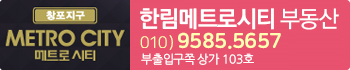
<style>
.page{position:relative;width:350px;height:70px}
.page>*{position:absolute;margin:0}
.t1{font:23px "KoPubDotumPB";letter-spacing:-0.025em;color:#ffffff}
.t2{font:23px "KoPubDotumPM";letter-spacing:-0.025em;color:#ffffff}
.t3{font:21px "NanumSquareRoundOTFEB";letter-spacing:-0.025em;color:#feffb3}
.t4{font:16px "NanumSquareRoundOTFL";letter-spacing:-0.025em;color:#feffb3}
.t5{font:12px "NanumGothicOTF";letter-spacing:-0.05em;color:#ffffff}
.t6{font:12px "NanumGothicOTF";color:#ffffff}
</style>
<div class="page">
<p class="t1" style="left:140px;top:8px;width:199px;height:22px">한림메트로시티 <span class="t2">부동산</span></p>
<p class="t3" style="left:140px;top:32px;width:141px;height:18px"><span class="t4">010 ) </span>9585.5657</p>
<p class="t5" style="left:141px;top:53px;width:113px;height:12px">부출입구쪽 상가 <span class="t6">103호</span></p>
</div>
